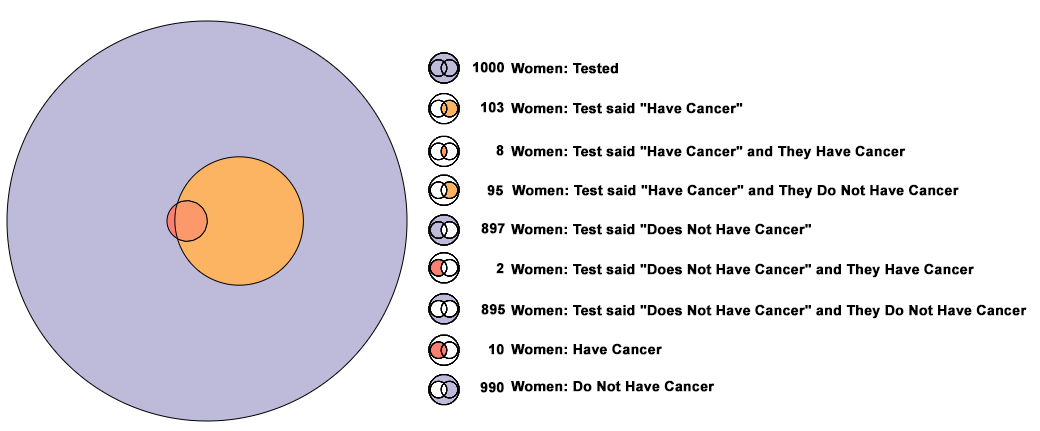
<style>
.page{position:relative;width:1040px;height:431px;background:#ffffff}
.page>*{position:absolute;margin:0}
.t1{font:14px "Arial-BoldMT";color:#000000;font-weight:bold}
</style>
<div class="page">
<p class="t1" style="left:473px;top:62px;width:31px;height:11px">1000</p>
<p class="t1" style="left:511px;top:63px;width:107px;height:11px">Women: Tested</p>
<p class="t1" style="left:481px;top:102px;width:23px;height:11px">103</p>
<p class="t1" style="left:511px;top:102px;width:232px;height:12px">Women: Test said "Have Cancer"</p>
<p class="t1" style="left:496px;top:145px;width:8px;height:11px">8</p>
<p class="t1" style="left:511px;top:145px;width:395px;height:15px">Women: Test said "Have Cancer" and They Have Cancer</p>
<p class="t1" style="left:487px;top:185px;width:16px;height:11px">95</p>
<p class="t1" style="left:512px;top:184px;width:447px;height:15px">Women: Test said "Have Cancer" and They Do Not Have Cancer</p>
<p class="t1" style="left:481px;top:223px;width:24px;height:11px">897</p>
<p class="t1" style="left:511px;top:223px;width:300px;height:12px">Women: Test said "Does Not Have Cancer"</p>
<p class="t1" style="left:496px;top:263px;width:8px;height:11px">2</p>
<p class="t1" style="left:511px;top:263px;width:463px;height:15px">Women: Test said "Does Not Have Cancer" and They Have Cancer</p>
<p class="t1" style="left:481px;top:304px;width:24px;height:11px">895</p>
<p class="t1" style="left:511px;top:304px;width:516px;height:15px">Women: Test said "Does Not Have Cancer" and They Do Not Have Cancer</p>
<p class="t1" style="left:489px;top:344px;width:15px;height:11px">10</p>
<p class="t1" style="left:511px;top:343px;width:151px;height:12px">Women: Have Cancer</p>
<p class="t1" style="left:480px;top:382px;width:24px;height:11px">990</p>
<p class="t1" style="left:511px;top:380px;width:204px;height:12px">Women: Do Not Have Cancer</p>
</div>
